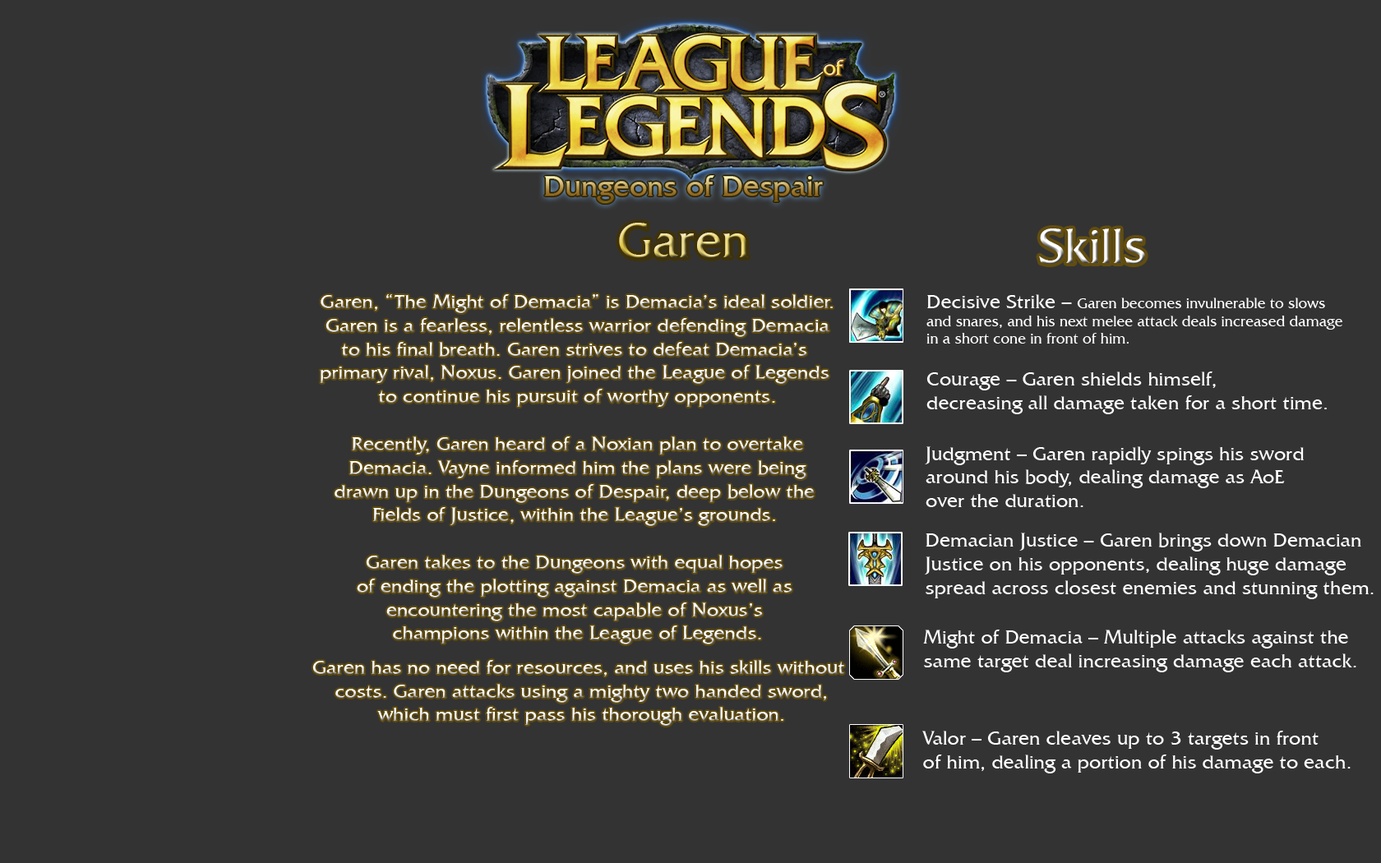
<style>
.page{position:relative;width:1381px;height:863px;background:#333333}
.page>*{position:absolute;margin:0}
.t1{font:49.4px "FrizQuadrataITCbyBT-Roman"}
.t2{font:19.7px "FrizQuadrataITCbyBT-Roman"}
.t3{font:14.8px "FrizQuadrataITCbyBT-Roman";color:#ffffff}
.t4{font:19.7px "FrizQuadrataITCbyBT-Roman";color:#ffffff}
</style>
<div class="page">
<p class="t1" style="left:619px;top:223px;width:129px;height:35px">Garen</p>
<p class="t1" style="left:1039px;top:229px;width:106px;height:35px">Skills</p>
<p class="t2" style="left:320px;top:294px;width:513px;height:351px;text-align:center">Garen, “The Might of Demacia” is Demacia’s ideal soldier.<br>Garen is a fearless, relentless warrior defending Demacia<br>to his final breath. Garen strives to defeat Demacia’s <br>primary rival, Noxus. Garen joined the League of Legends <br>to continue his pursuit of worthy opponents.<br><br>Recently, Garen heard of a Noxian plan to overtake<br>Demacia. Vayne informed him the plans were being<br>drawn up in the Dungeons of Despair, deep below the <br>Fields of Justice, within the League’s grounds. <br><br>Garen takes to the Dungeons with equal hopes <br>of ending the plotting against Demacia as well as <br>encountering the most capable of Noxus’s <br>champions within the League of Legends.</p>
<p class="t3" style="left:927px;top:294px;width:416px;height:50px"><span class="t4">Decisive Strike – </span>Garen becomes invulnerable to slows <br>and snares, and his next melee attack deals increased damage <br>in a short cone in front of him.</p>
<p class="t4" style="left:927px;top:372px;width:400px;height:42px">Courage – Garen shields himself, <br>decreasing all damage taken for a short time.</p>
<p class="t4" style="left:925px;top:446px;width:379px;height:61px">Judgment – Garen rapidly spings his sword <br>around his body, dealing damage as AoE <br>over the duration.</p>
<p class="t4" style="left:925px;top:533px;width:449px;height:66px">Demacian Justice – Garen brings down Demacian <br>Justice on his opponents, dealing huge damage <br>spread across closest enemies and stunning them.</p>
<p class="t4" style="left:923px;top:630px;width:434px;height:43px">Might of Demacia – Multiple attacks against the <br>same target deal increasing damage each attack.</p>
<p class="t4" style="left:312px;top:660px;width:532px;height:66px;text-align:center">Garen has no need for resources, and uses his skills without <br>costs. Garen attacks using a mighty two handed sword,<br>which must first pass his thorough evaluation.</p>
<p class="t4" style="left:922px;top:731px;width:429px;height:43px">Valor – Garen cleaves up to 3 targets in front <br>of him, dealing a portion of his damage to each.</p>
</div>
